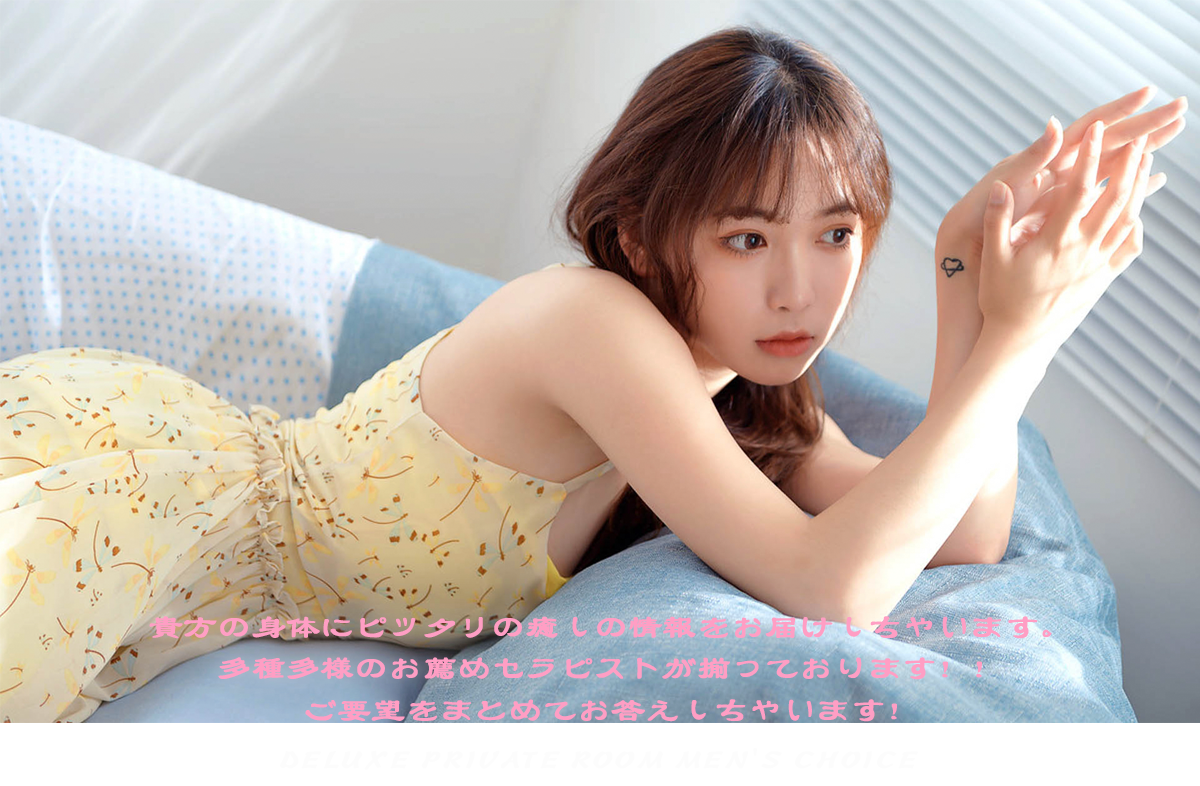
<style>
.page{position:relative;width:1200px;height:786px}
.page>*{position:absolute;margin:0}
.t1{font:33.3px/20.8px "STBaoliSC-Regular";color:#ff9ec4;text-transform:uppercase;font-weight:bold}
</style>
<div class="page">
<p class="t1" style="left:149px;top:616px;width:903px;height:106px;text-align:center">貴方の身体にピッタリの癒しの情報をお届けしちゃいます。<br><br>多種多様のお薦めセラピストが揃っております！！<br><br>ご要望をまとめてお答えしちゃいます！</p>
</div>
